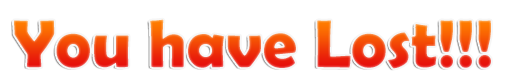
<style>
.page{position:relative;width:512px;height:83px;background:#ffffff}
.page>*{position:absolute;margin:0}
.t1{font:68px "BerlinSansFBDemi-Bold"}
</style>
<div class="page">
<p class="t1" style="left:14px;top:19px;width:477px;height:50px">You have Lost!!!</p>
</div>
